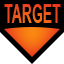
<style>
.page{position:relative;width:64px;height:64px;background:#000000}
.page>*{position:absolute;margin:0}
.t1{font:26.2px "ArialNarrow-Bold";letter-spacing:0.01em;color:#ed531c;scale:0.64 1}
</style>
<div class="page">
<p class="t1" style="left:4px;top:4px;width:57px;height:19px">TARGET</p>
</div>
